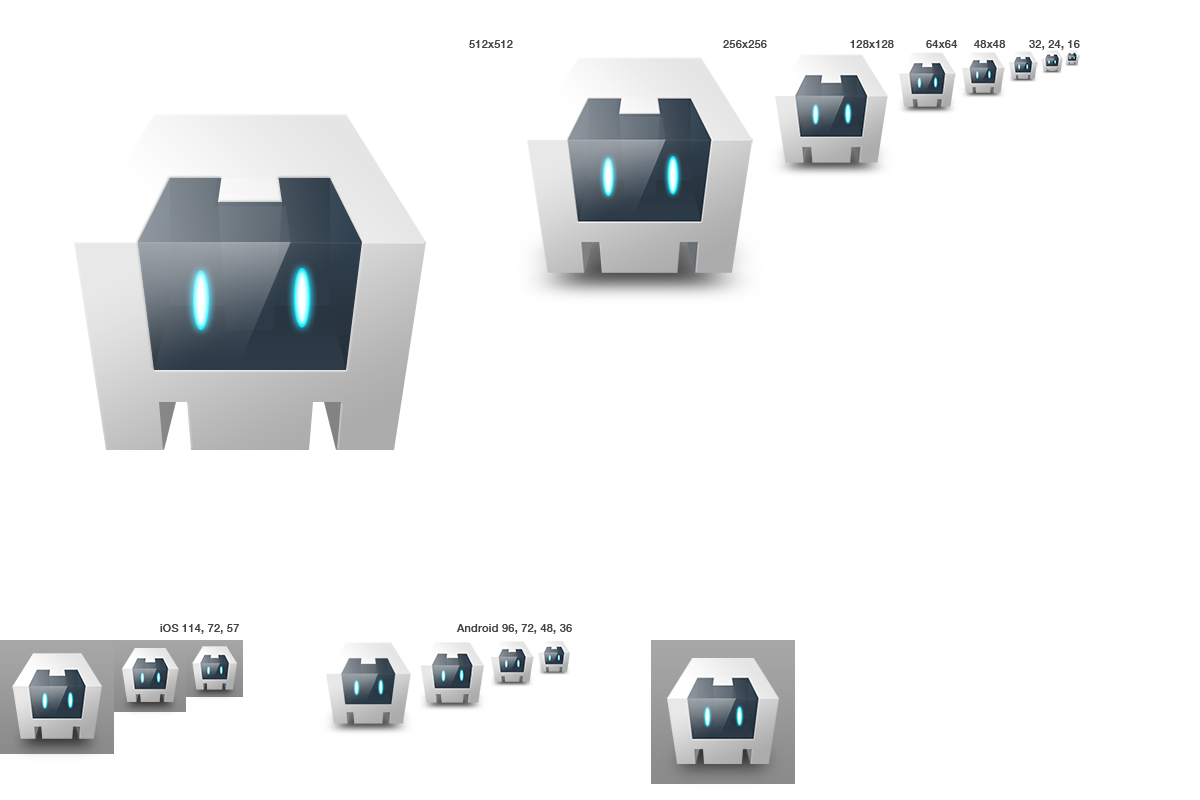
<style>
.page{position:relative;width:1200px;height:800px;background:#ffffff}
.page>*{position:absolute;margin:0}
.t1{font:11px "HelveticaNeue-Medium";letter-spacing:0.02em;color:#444444}
</style>
<div class="page">
<p class="t1" style="left:469px;top:40px;width:44px;height:8px">512x512</p>
<p class="t1" style="left:723px;top:40px;width:44px;height:8px">256x256</p>
<p class="t1" style="left:850px;top:40px;width:44px;height:8px">128x128</p>
<p class="t1" style="left:926px;top:40px;width:32px;height:8px">64x64</p>
<p class="t1" style="left:974px;top:40px;width:32px;height:8px">48x48</p>
<p class="t1" style="left:1029px;top:40px;width:51px;height:10px">32, 24, 16</p>
<p class="t1" style="left:160px;top:624px;width:79px;height:10px">iOS 114, 72, 57</p>
<p class="t1" style="left:456px;top:624px;width:116px;height:10px">Android 96, 72, 48, 36</p>
</div>
